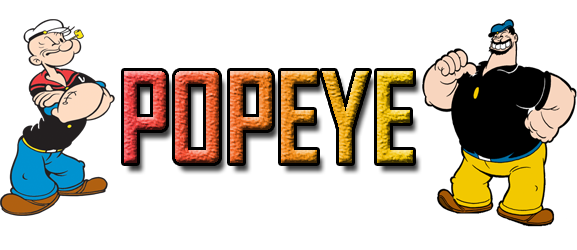
<style>
.page{position:relative;width:577px;height:250px;background:#ffffff}
.page>*{position:absolute;margin:0}
.t1{font:120.1px "AgencyFB-Bold";scale:0.95 1}
</style>
<div class="page">
<p class="t1" style="left:124px;top:71px;width:289px;height:92px">POPEYE</p>
</div>
